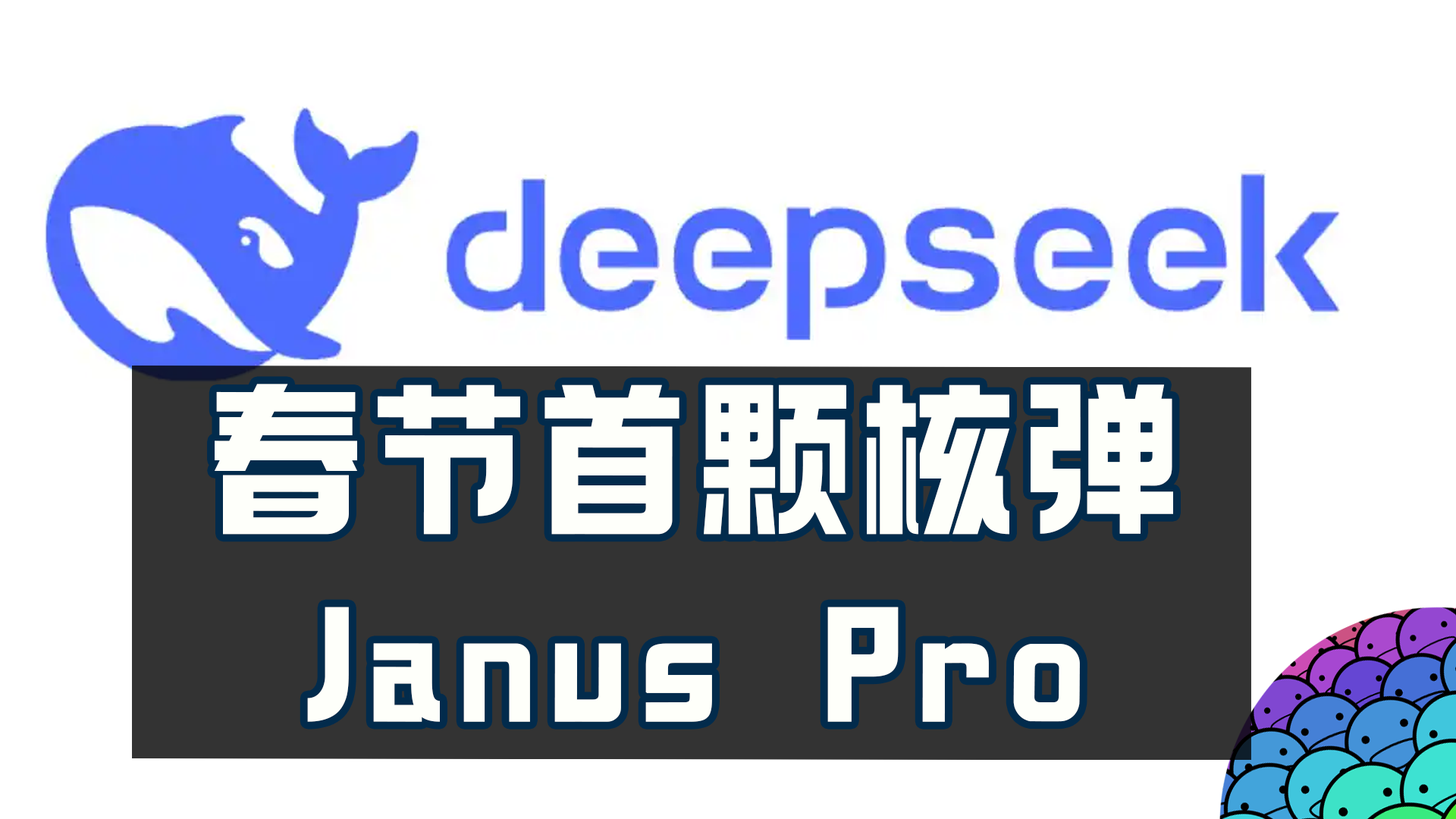
<style>
.page{position:relative;width:1456px;height:819px;background:#ffffff}
.page>*{position:absolute;margin:0}
.t1{font:166.8px/204.7px "098-";letter-spacing:0.05em;color:#fefffa}
</style>
<div class="page">
<p class="t1" style="left:215px;top:384px;width:958px;height:338px;text-align:center">春节首颗核弹<br>Janus Pro</p>
</div>
